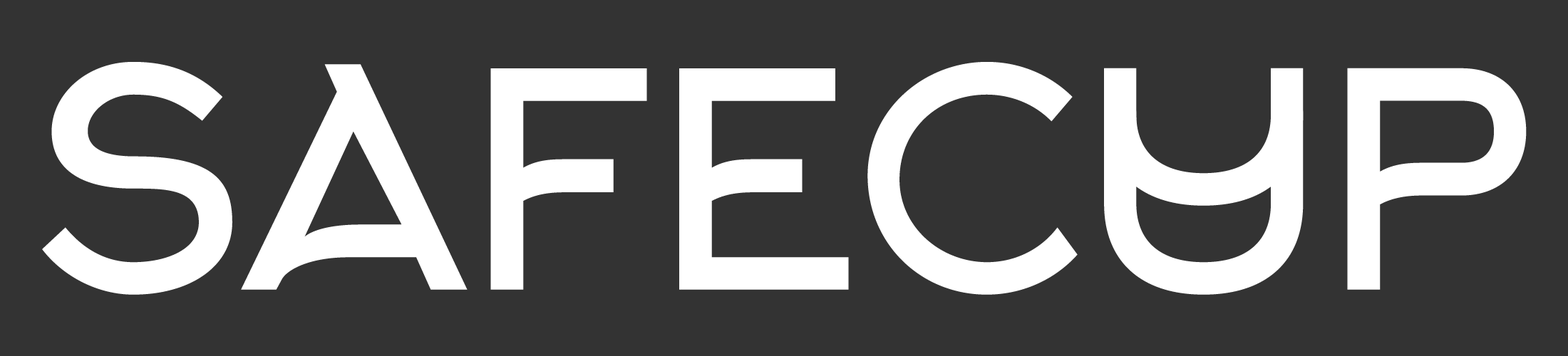
<style>
.page{position:relative;width:1568px;height:356px;background:#333333}
.page>*{position:absolute;margin:0}
.t1{font:297px "Arkhip";letter-spacing:-0.06em;color:#ffffff}
</style>
<div class="page">
<p class="t1" style="left:42px;top:62px;width:1485px;height:233px">SAFECUP</p>
</div>
